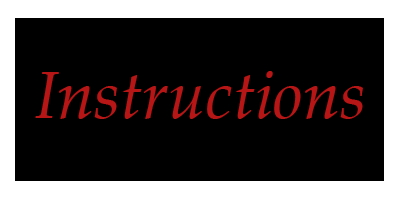
<style>
.page{position:relative;width:400px;height:200px;background:#000000}
.page>*{position:absolute;margin:0}
.t1{font:66.7px "PalatinoLinotype-Italic";color:#b71616}
</style>
<div class="page">
<p class="t1" style="left:35px;top:71px;width:328px;height:48px">Instructions</p>
</div>
